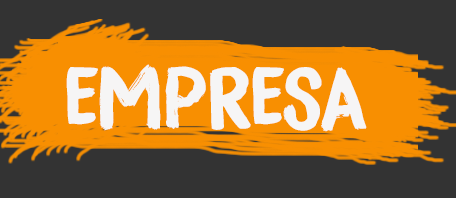
<style>
.page{position:relative;width:456px;height:198px;background:#333333}
.page>*{position:absolute;margin:0}
.t1{font:90px "MidnightSunDEMO-Regular";color:#f6f5f5}
</style>
<div class="page">
<p class="t1" style="left:66px;top:64px;width:301px;height:68px">EMPRESA</p>
</div>
